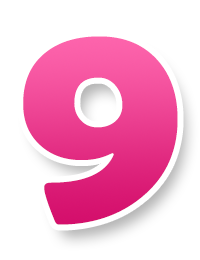
<style>
.page{position:relative;width:200px;height:260px;background:#ffffff}
.page>*{position:absolute;margin:0}
.t1{font:300px "BerlinSansFBDemi-Bold"}
</style>
<div class="page">
<p class="t1" style="left:23px;top:36px;width:155px;height:189px">9</p>
</div>
